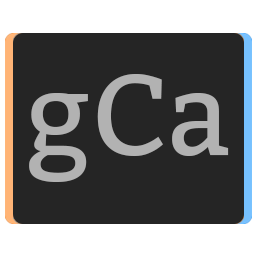
<style>
.page{position:relative;width:256px;height:256px;background:#252525}
.page>*{position:absolute;margin:0}
.t1{font:114.2px "Kadwa-Regular";color:#b2b2b2}
</style>
<div class="page">
<p class="t1" style="left:29px;top:74px;width:200px;height:108px">gCa</p>
</div>
